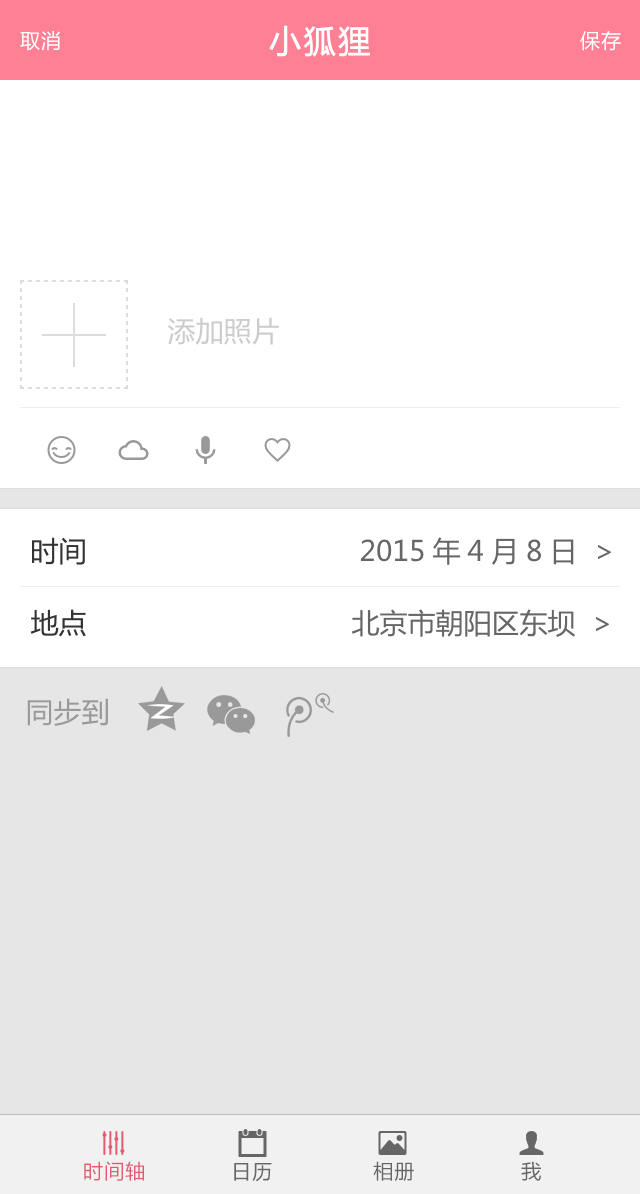
<style>
.page{position:relative;width:640px;height:1194px;background:#ffffff}
.page>*{position:absolute;margin:0}
.t1{font:32px "MicrosoftYaHei";letter-spacing:0.05em;color:#ffffff;font-weight:bold}
.t2{font:20px "MicrosoftYaHei";letter-spacing:0.05em;color:#ffffff}
.t3{font:28px "MicrosoftYaHei";color:#cccccc}
.t4{font:28px/36px "MicrosoftYaHei";color:#666666}
.t5{font:28px/36px "MicrosoftYaHei";color:#333333}
.t6{font:28px "MicrosoftYaHei";color:#999999}
.t7{font:20px "MicrosoftYaHei";letter-spacing:0.05em;color:#df5c71}
.t8{font:20px "MicrosoftYaHei";letter-spacing:0.05em;color:#666666}
</style>
<div class="page">
<p class="t1" style="left:269px;top:25px;width:101px;height:32px">小狐狸</p>
<p class="t2" style="left:20px;top:31px;width:40px;height:20px">取消</p>
<p class="t2" style="left:580px;top:31px;width:41px;height:20px">保存</p>
<p class="t3" style="left:168px;top:317px;width:111px;height:28px">添加照片</p>
<p class="t4" style="left:30px;top:537px;width:581px;height:100px"><span class="t5">时间                                 </span>2015年4月8日  &gt;<br><span class="t5"><br>地点                                </span>北京市朝阳区东坝  &gt;</p>
<p class="t6" style="left:27px;top:698px;width:81px;height:28px">同步到</p>
<p class="t7" style="left:84px;top:1161px;width:60px;height:20px">时间轴</p>
<p class="t8" style="left:234px;top:1163px;width:38px;height:19px">日历</p>
<p class="t8" style="left:373px;top:1161px;width:41px;height:20px">相册</p>
<p class="t8" style="left:521px;top:1161px;width:20px;height:20px">我</p>
</div>
